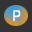
<style>
.page{position:relative;width:32px;height:32px;background:#333333}
.page>*{position:absolute;margin:0}
.t1{font:14px "OCRAStd";color:#ffffff}
</style>
<div class="page">
<p class="t1" style="left:13px;top:10px;width:8px;height:12px">P</p>
</div>
